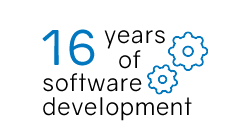
<style>
.page{position:relative;width:250px;height:130px;background:#ffffff}
.page>*{position:absolute;margin:0}
.t1{font:48px "Gravity-Regular";letter-spacing:0.1em;color:#0077be}
.t2{font:24px "Gravity-Book";letter-spacing:0.025em;color:#000000}
</style>
<div class="page">
<p class="t1" style="left:42px;top:29px;width:53px;height:37px">16</p>
<p class="t2" style="left:104px;top:30px;width:61px;height:19px">years</p>
<p class="t2" style="left:119px;top:50px;width:22px;height:19px">of</p>
<p class="t2" style="left:43px;top:73px;width:99px;height:19px">software</p>
<p class="t2" style="left:43px;top:97px;width:149px;height:24px">development</p>
</div>
